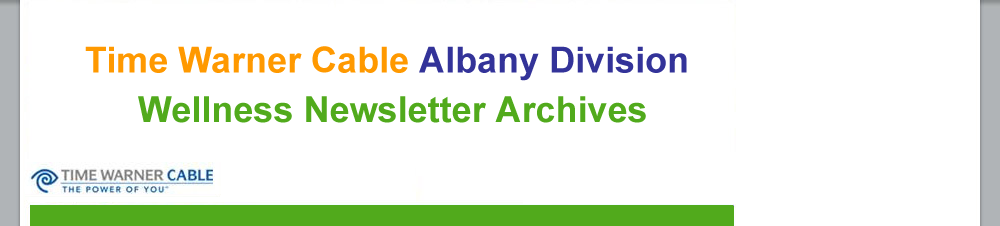
<style>
.page{position:relative;width:1000px;height:226px;background:#ffffff}
.page>*{position:absolute;margin:0}
.t1{font:36px "Arial-BoldMT";color:#ff9900}
.t2{font:36px "Arial-BoldMT";color:#333399}
.t3{font:36px "Arial-BoldMT";color:#51aa1c}
</style>
<div class="page">
<p class="t1" style="left:85px;top:46px;width:602px;height:35px">Time Warner Cable <span class="t2">Albany Division</span></p>
<p class="t3" style="left:138px;top:96px;width:508px;height:27px">Wellness Newsletter Archives</p>
</div>
